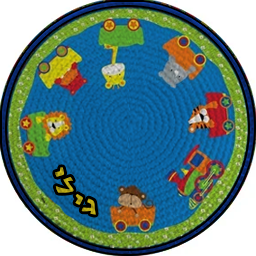
<style>
.page{position:relative;width:256px;height:256px}
.page>*{position:absolute;margin:0}
.t1{font:25.5px "TrashimCLM-Bold";letter-spacing:0.06em;color:#b5a416}
</style>
<div class="page">
<p class="t1" style="left:55px;top:167px;width:41px;height:48px;rotate:47deg">גילי</p>
</div>
